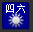
<style>
.page{position:relative;width:33px;height:32px;background:#000090}
.page>*{position:absolute;margin:0}
.t1{font:10.4px "SimSun";color:#ffffff}
</style>
<div class="page">
<p class="t1" style="left:6px;top:4px;width:19px;height:9px">四六</p>
</div>
